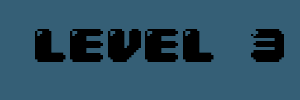
<style>
.page{position:relative;width:300px;height:100px;background:#355f76}
.page>*{position:absolute;margin:0}
.t1{font:40px "04b30";color:#000000}
</style>
<div class="page">
<p class="t1" style="left:35px;top:29px;width:249px;height:33px">LEVEL 3</p>
</div>
